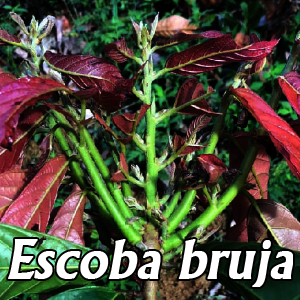
<style>
.page{position:relative;width:300px;height:300px}
.page>*{position:absolute;margin:0}
.t1{font:55.6px "Narkisim";color:#ffffff;font-weight:bold;font-style:italic}
</style>
<div class="page">
<p class="t1" style="left:8px;top:239px;width:285px;height:48px">Escoba bruja</p>
</div>
